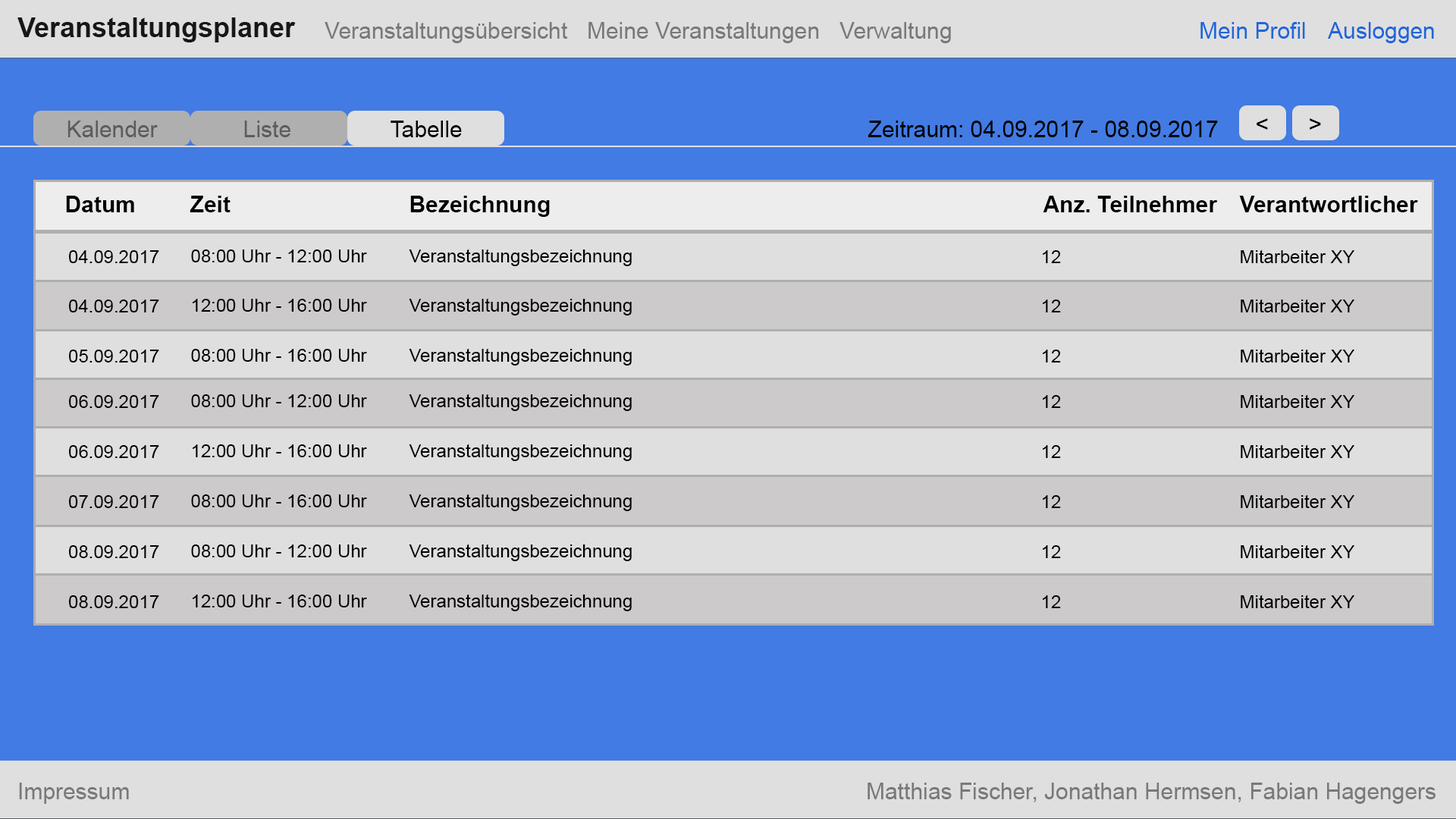
<style>
.page{position:relative;width:1456px;height:819px;background:#dfdfdf}
.page>*{position:absolute;margin:0}
.t1{font:27.3px "Arial-BoldMT";color:#171717}
.t2{font:22.7px "ArialMT";color:#797979}
.t3{font:22.7px "ArialMT";color:#2066da}
.t4{font:22.7px "ArialMT";color:#5c5c5c}
.t5{font:22.7px "ArialMT";color:#000000}
.t6{font:22.7px "Arial-BoldMT";color:#000000}
.t7{font:18.2px "ArialMT";color:#000000}
</style>
<div class="page">
<p class="t1" style="left:17px;top:17px;width:279px;height:25px">Veranstaltungsplaner</p>
<p class="t2" style="left:325px;top:22px;width:242px;height:21px">Veranstaltungsübersicht</p>
<p class="t2" style="left:588px;top:22px;width:231px;height:21px">Meine Veranstaltungen</p>
<p class="t2" style="left:839px;top:22px;width:112px;height:21px">Verwaltung</p>
<p class="t3" style="left:1200px;top:22px;width:105px;height:17px">Mein Profil</p>
<p class="t3" style="left:1327px;top:22px;width:107px;height:21px">Ausloggen</p>
<p class="t4" style="left:67px;top:121px;width:91px;height:16px">Kalender</p>
<p class="t4" style="left:244px;top:121px;width:46px;height:16px">Liste</p>
<p class="t5" style="left:391px;top:121px;width:71px;height:16px">Tabelle</p>
<p class="t5" style="left:868px;top:121px;width:350px;height:16px">Zeitraum: 04.09.2017 - 08.09.2017</p>
<p class="t5" style="left:1257px;top:118px;width:11px;height:12px">&lt;</p>
<p class="t5" style="left:1310px;top:118px;width:11px;height:12px">&gt;</p>
<p class="t6" style="left:66px;top:196px;width:68px;height:16px">Datum</p>
<p class="t6" style="left:190px;top:196px;width:41px;height:16px">Zeit</p>
<p class="t6" style="left:410px;top:196px;width:140px;height:21px">Bezeichnung</p>
<p class="t6" style="left:1043px;top:196px;width:175px;height:16px">Anz. Teilnehmer</p>
<p class="t6" style="left:1239px;top:196px;width:179px;height:16px">Verantwortlicher</p>
<p class="t7" style="left:68px;top:250px;width:91px;height:13px">04.09.2017</p>
<p class="t7" style="left:191px;top:249px;width:176px;height:13px">08:00 Uhr - 12:00 Uhr</p>
<p class="t7" style="left:409px;top:249px;width:223px;height:17px">Veranstaltungsbezeichnung</p>
<p class="t7" style="left:1043px;top:250px;width:18px;height:13px">12</p>
<p class="t7" style="left:1241px;top:249px;width:113px;height:14px">Mitarbeiter XY</p>
<p class="t7" style="left:68px;top:300px;width:91px;height:12px">04.09.2017</p>
<p class="t7" style="left:193px;top:299px;width:174px;height:13px">12:00 Uhr - 16:00 Uhr</p>
<p class="t7" style="left:409px;top:298px;width:223px;height:17px">Veranstaltungsbezeichnung</p>
<p class="t7" style="left:1043px;top:300px;width:18px;height:12px">12</p>
<p class="t7" style="left:1241px;top:299px;width:113px;height:13px">Mitarbeiter XY</p>
<p class="t7" style="left:68px;top:350px;width:91px;height:12px">05.09.2017</p>
<p class="t7" style="left:191px;top:349px;width:176px;height:13px">08:00 Uhr - 16:00 Uhr</p>
<p class="t7" style="left:409px;top:348px;width:223px;height:18px">Veranstaltungsbezeichnung</p>
<p class="t7" style="left:1043px;top:350px;width:18px;height:12px">12</p>
<p class="t7" style="left:1241px;top:349px;width:113px;height:13px">Mitarbeiter XY</p>
<p class="t7" style="left:68px;top:395px;width:91px;height:13px">06.09.2017</p>
<p class="t7" style="left:191px;top:394px;width:176px;height:13px">08:00 Uhr - 12:00 Uhr</p>
<p class="t7" style="left:409px;top:394px;width:223px;height:17px">Veranstaltungsbezeichnung</p>
<p class="t7" style="left:1043px;top:395px;width:18px;height:13px">12</p>
<p class="t7" style="left:1241px;top:394px;width:113px;height:14px">Mitarbeiter XY</p>
<p class="t7" style="left:68px;top:445px;width:91px;height:13px">06.09.2017</p>
<p class="t7" style="left:193px;top:444px;width:174px;height:13px">12:00 Uhr - 16:00 Uhr</p>
<p class="t7" style="left:409px;top:444px;width:223px;height:17px">Veranstaltungsbezeichnung</p>
<p class="t7" style="left:1043px;top:445px;width:18px;height:13px">12</p>
<p class="t7" style="left:1241px;top:444px;width:113px;height:14px">Mitarbeiter XY</p>
<p class="t7" style="left:68px;top:495px;width:91px;height:13px">07.09.2017</p>
<p class="t7" style="left:191px;top:494px;width:176px;height:13px">08:00 Uhr - 16:00 Uhr</p>
<p class="t7" style="left:409px;top:494px;width:223px;height:17px">Veranstaltungsbezeichnung</p>
<p class="t7" style="left:1043px;top:495px;width:18px;height:13px">12</p>
<p class="t7" style="left:1241px;top:494px;width:113px;height:14px">Mitarbeiter XY</p>
<p class="t7" style="left:68px;top:545px;width:91px;height:13px">08.09.2017</p>
<p class="t7" style="left:191px;top:544px;width:176px;height:13px">08:00 Uhr - 12:00 Uhr</p>
<p class="t7" style="left:409px;top:544px;width:223px;height:17px">Veranstaltungsbezeichnung</p>
<p class="t7" style="left:1043px;top:545px;width:18px;height:13px">12</p>
<p class="t7" style="left:1241px;top:544px;width:113px;height:14px">Mitarbeiter XY</p>
<p class="t7" style="left:409px;top:594px;width:223px;height:17px">Veranstaltungsbezeichnung</p>
<p class="t7" style="left:68px;top:595px;width:91px;height:13px">08.09.2017</p>
<p class="t7" style="left:193px;top:595px;width:174px;height:12px">12:00 Uhr - 16:00 Uhr</p>
<p class="t7" style="left:1043px;top:595px;width:18px;height:13px">12</p>
<p class="t7" style="left:1241px;top:595px;width:113px;height:13px">Mitarbeiter XY</p>
<p class="t2" style="left:19px;top:783px;width:110px;height:21px">Impressum</p>
<p class="t2" style="left:868px;top:783px;width:568px;height:21px">Matthias Fischer, Jonathan Hermsen, Fabian Hagengers</p>
</div>
